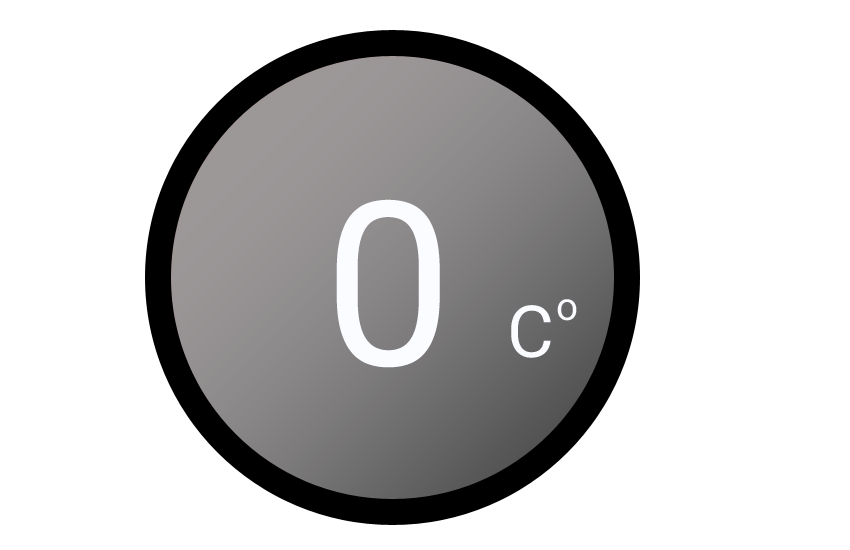
<style>
.page{position:relative;width:850px;height:550px;background:#ffffff}
.page>*{position:absolute;margin:0}
.t1{font:229.2px "Roboto-Regular";color:#fbfcff}
.t2{font:72px "Roboto-Regular";color:#fbfcff}
.t3{font:38.9px "Roboto-Regular";color:#fbfcff}
</style>
<div class="page">
<p class="t1" style="left:336px;top:199px;width:104px;height:169px">0</p>
<p class="t2" style="left:511px;top:305px;width:40px;height:53px">C</p>
<p class="t3" style="left:557px;top:299px;width:20px;height:22px">o</p>
</div>
